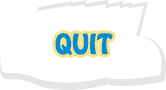
<style>
.page{position:relative;width:166px;height:90px;background:#ffffff}
.page>*{position:absolute;margin:0}
.t1{font:24px "HoboStd";letter-spacing:-0.01em;color:#028dd2;font-weight:bold}
</style>
<div class="page">
<p class="t1" style="left:55px;top:33px;width:58px;height:23px">QUIT</p>
</div>
